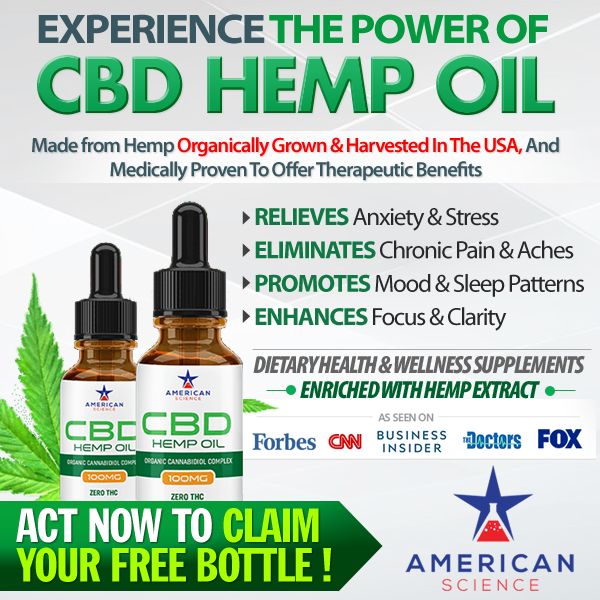
<style>
.page{position:relative;width:600px;height:600px}
.page>*{position:absolute;margin:0}
.t1{font:41.7px "MyriadPro-BoldSemiExt";letter-spacing:-0.05em;color:#02993f;text-transform:uppercase}
.t2{font:41.7px "MyriadPro-BoldSemiExt";letter-spacing:-0.05em;color:#395761;text-transform:uppercase}
.t3{font:75px "FuturaLT-Bold";letter-spacing:-0.05em;color:#08ad57}
.t4{font:20.8px/24.2px "MyriadPro-Semibold";letter-spacing:-0.05em;color:#395761}
.t5{font:20.8px/24.2px "MyriadPro-Semibold";letter-spacing:-0.05em;color:#ff0000}
.t6{font:25px/33.3px "MyriadPro-Regular";letter-spacing:-0.05em;color:#27282a}
.t7{font:25px/33.3px "MyriadPro-Bold";letter-spacing:-0.05em;color:#107745;text-transform:uppercase}
.t8{font:25px/25px "MyriadPro-BlackCondIt";letter-spacing:-0.05em;color:#656464}
.t9{font:25px/25px "MyriadPro-BlackCondIt";letter-spacing:-0.05em;color:#00612f}
.t10{font:45.8px/39.6px "FranklinGoth-ExtCondensed";letter-spacing:-0.05em;color:#a9ff00;text-transform:uppercase}
.t11{font:45.8px/39.6px "FranklinGoth-ExtCondensed";letter-spacing:-0.05em;color:#ffffff;text-transform:uppercase}
</style>
<div class="page">
<p class="t1" style="left:38px;top:14px;width:510px;height:30px"><span class="t2">Experience </span>The Power Of</p>
<p class="t3" style="left:37px;top:54px;width:518px;height:61px">CBD HEMP OIL</p>
<p class="t4" style="left:32px;top:137px;width:527px;height:44px">Made from Hemp <span class="t5">Organically Grown &amp; Harvested In The USA, </span>And<br>                        Medically Proven To Offer Therapeutic Benefits</p>
<p class="t6" style="left:255px;top:208px;width:329px;height:123px"><span class="t7">Relieves </span>Anxiety &amp; Stress<br><span class="t7">Eliminates </span>Chronic Pain &amp; Aches<br><span class="t7">Promotes </span>Mood &amp; Sleep Patterns<br><span class="t7">Enhances </span>Focus &amp; Clarity</p>
<p class="t8" style="left:253px;top:356px;width:332px;height:43px">DIETARY HEALTH &amp; WELLNESS SUPPLEMENTS<br>                  <span class="t9">   ENRICHED WITH HEMP EXTRACT</span></p>
<p class="t10" style="left:16px;top:508px;width:315px;height:74px"><span class="t11">Act Now To </span>Claim <br>Your Free Bottle !</p>
</div>
